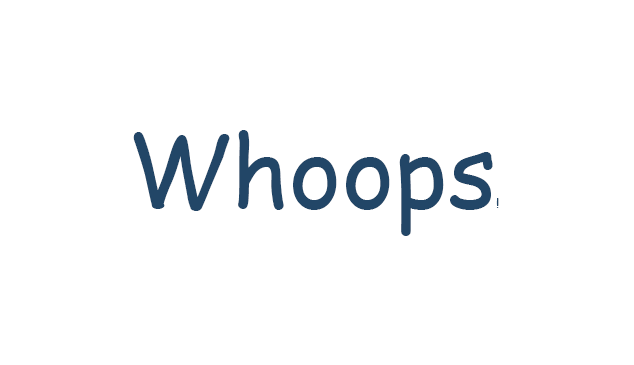
<style>
.page{position:relative;width:634px;height:365px;background:#ffffff}
.page>*{position:absolute;margin:0}
.t1{font:100px "ComicSansMS";color:#224667}
.t2{font:12px "ComicSansMS";color:#224667}
</style>
<div class="page">
<p class="t1" style="left:133px;top:130px;width:366px;height:106px">Whoops<span class="t2">!</span></p>
</div>
